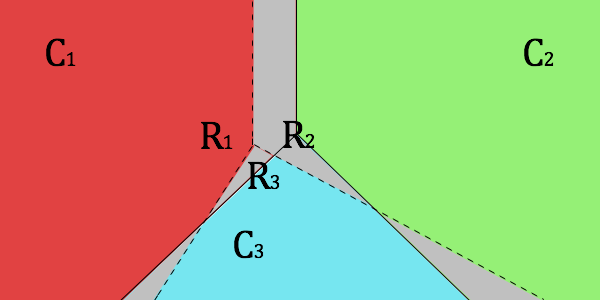
<style>
.page{position:relative;width:600px;height:300px;background:#95f076}
.page>*{position:absolute;margin:0}
.t1{font:40px "Cambria";letter-spacing:-0.025em;color:#000000}
.t2{font:20px "Cambria";letter-spacing:-0.025em;color:#000000}
</style>
<div class="page">
<p class="t1" style="left:46px;top:38px;width:30px;height:29px">C<span class="t2">1</span></p>
<p class="t1" style="left:524px;top:38px;width:30px;height:29px">C<span class="t2">2</span></p>
<p class="t1" style="left:201px;top:121px;width:32px;height:28px">R<span class="t2">1</span></p>
<p class="t1" style="left:283px;top:120px;width:32px;height:28px">R<span class="t2">2</span></p>
<p class="t1" style="left:248px;top:161px;width:32px;height:29px">R<span class="t2">3</span></p>
<p class="t1" style="left:234px;top:230px;width:30px;height:29px">C<span class="t2">3</span></p>
</div>
